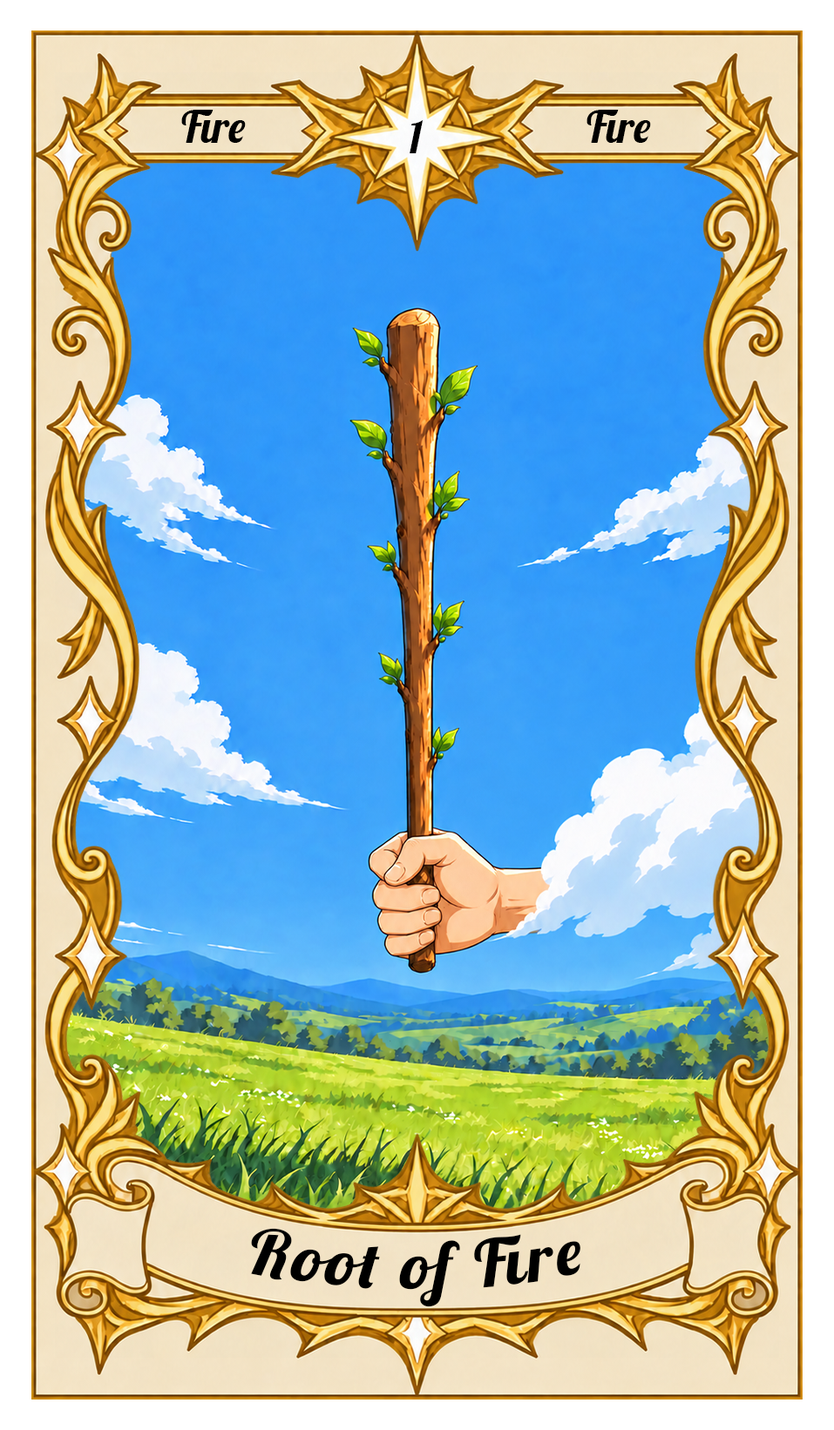
<style>
.page{position:relative;width:834px;height:1430px}
.page>*{position:absolute;margin:0}
.t1{font:43.6px "Lobster-Regular";color:#000000}
.t2{font:65.3px "Lobster-Regular";letter-spacing:0.05em;color:#000000}
</style>
<div class="page">
<p class="t1" style="left:181px;top:110px;width:65px;height:33px">Fire</p>
<p class="t1" style="left:586px;top:110px;width:65px;height:33px">Fire</p>
<p class="t1" style="left:409px;top:120px;width:14px;height:33px">1</p>
<p class="t2" style="left:251px;top:1228px;width:329px;height:80px">Root of Fire</p>
</div>
